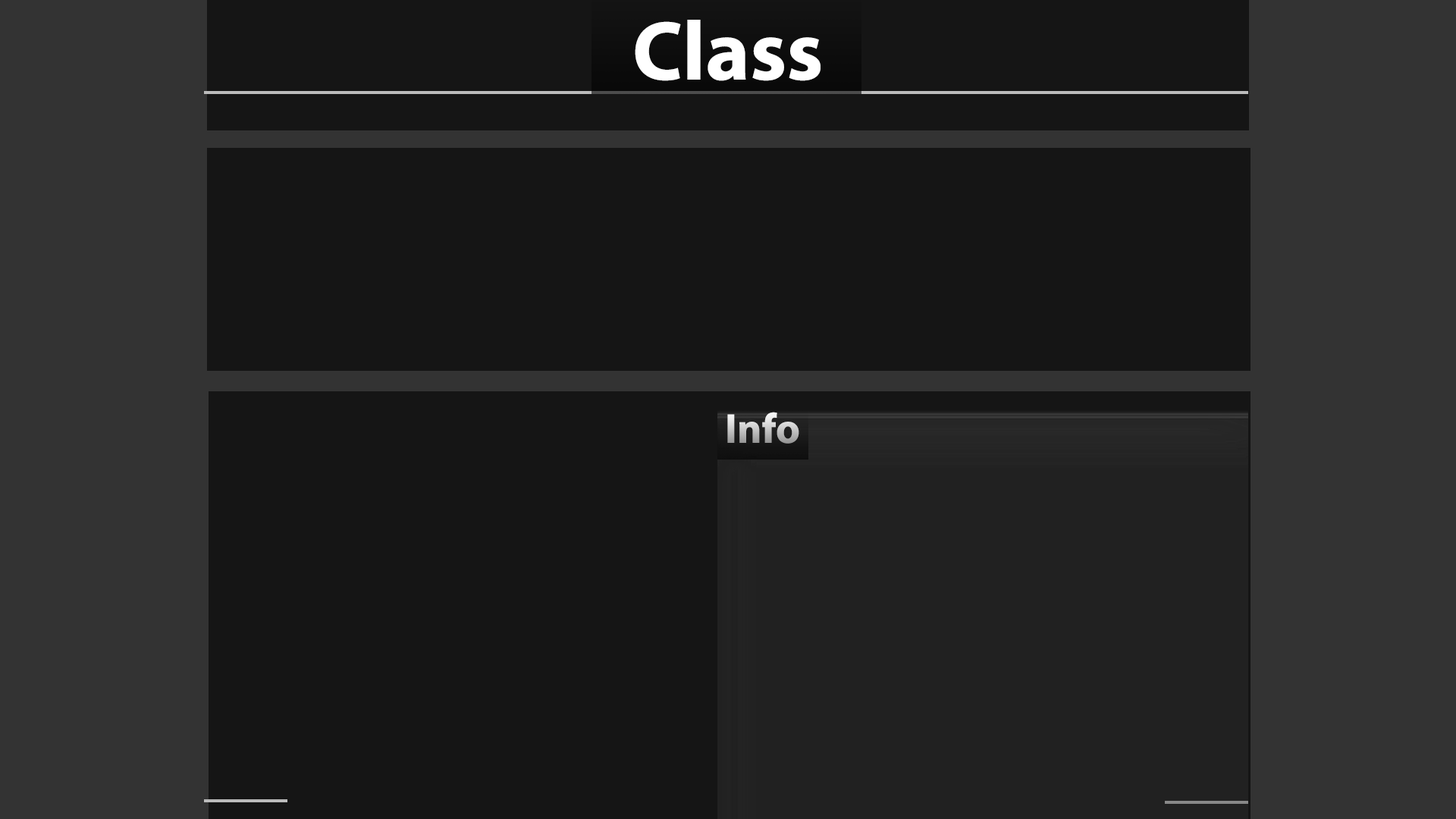
<style>
.page{position:relative;width:1456px;height:819px;background:#151515}
.page>*{position:absolute;margin:0}
.t1{font:84.3px "MyriadPro-Bold";color:#ffffff}
.t2{font:42.1px "MyriadPro-Bold"}
</style>
<div class="page">
<p class="t1" style="left:635px;top:20px;width:186px;height:61px">Class</p>
<p class="t2" style="left:727px;top:412px;width:72px;height:32px">Info</p>
</div>
